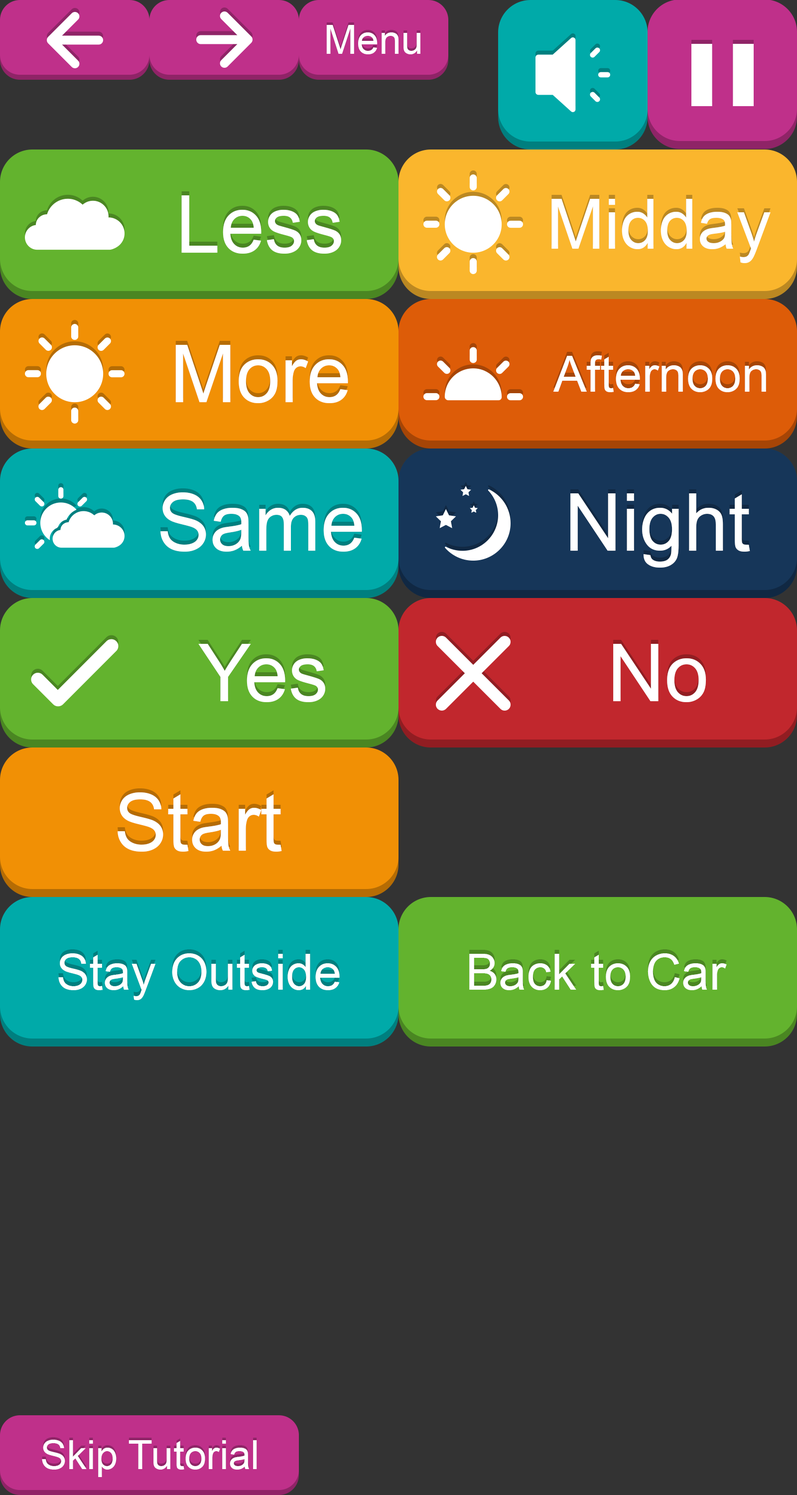
<style>
.page{position:relative;width:797px;height:1495px;background:#333333}
.page>*{position:absolute;margin:0}
.t1{font:39.9px "ArialMT";color:#ffffff}
.t2{font:79.7px "ArialMT";color:#ffffff}
.t3{font:69.8px "ArialMT";color:#ffffff}
.t4{font:49.8px "ArialMT";color:#ffffff}
</style>
<div class="page">
<p class="t1" style="left:326px;top:25px;width:95px;height:29px">Menu</p>
<p class="t2" style="left:181px;top:195px;width:160px;height:59px">Less</p>
<p class="t3" style="left:552px;top:199px;width:219px;height:64px">Midday</p>
<p class="t2" style="left:175px;top:345px;width:173px;height:58px">More</p>
<p class="t4" style="left:553px;top:355px;width:214px;height:37px">Afternoon</p>
<p class="t2" style="left:160px;top:492px;width:202px;height:60px">Same</p>
<p class="t2" style="left:571px;top:493px;width:180px;height:75px">Night</p>
<p class="t2" style="left:198px;top:644px;width:127px;height:58px">Yes</p>
<p class="t2" style="left:614px;top:644px;width:93px;height:58px">No</p>
<p class="t2" style="left:118px;top:792px;width:164px;height:60px">Start</p>
<p class="t4" style="left:58px;top:953px;width:282px;height:47px">Stay Outside</p>
<p class="t4" style="left:470px;top:953px;width:257px;height:37px">Back to Car</p>
<p class="t1" style="left:42px;top:1440px;width:215px;height:37px">Skip Tutorial</p>
</div>
